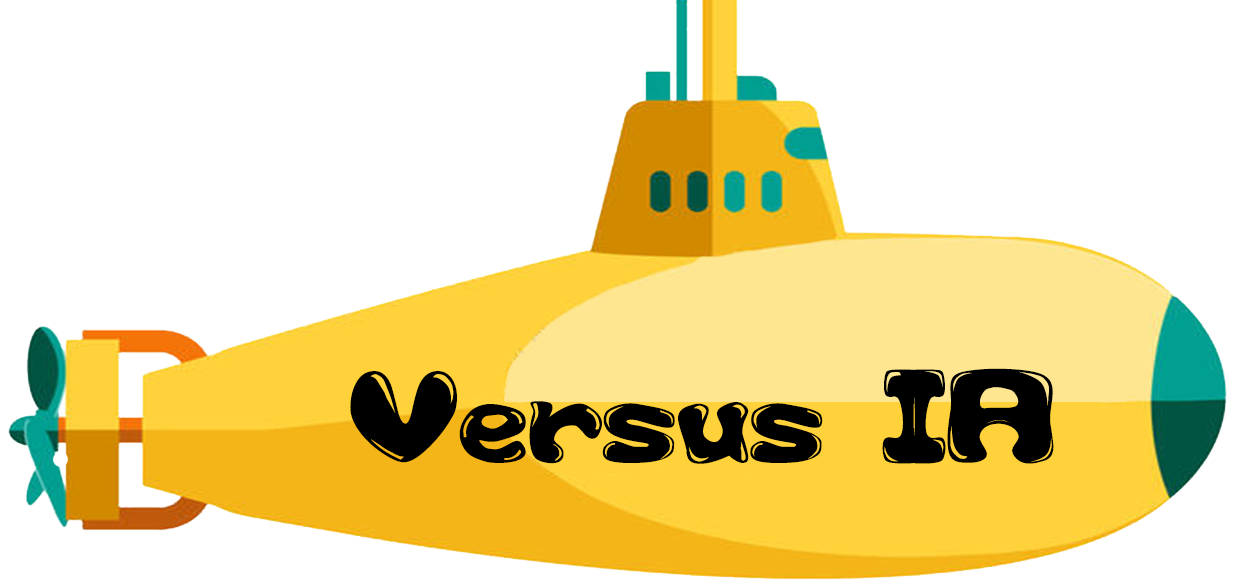
<style>
.page{position:relative;width:1235px;height:586px;background:#ffffff}
.page>*{position:absolute;margin:0}
.t1{font:116.7px "GFS-Custom-Bubble1";color:#000000}
</style>
<div class="page">
<p class="t1" style="left:350px;top:368px;width:704px;height:96px">Versus IA</p>
</div>
